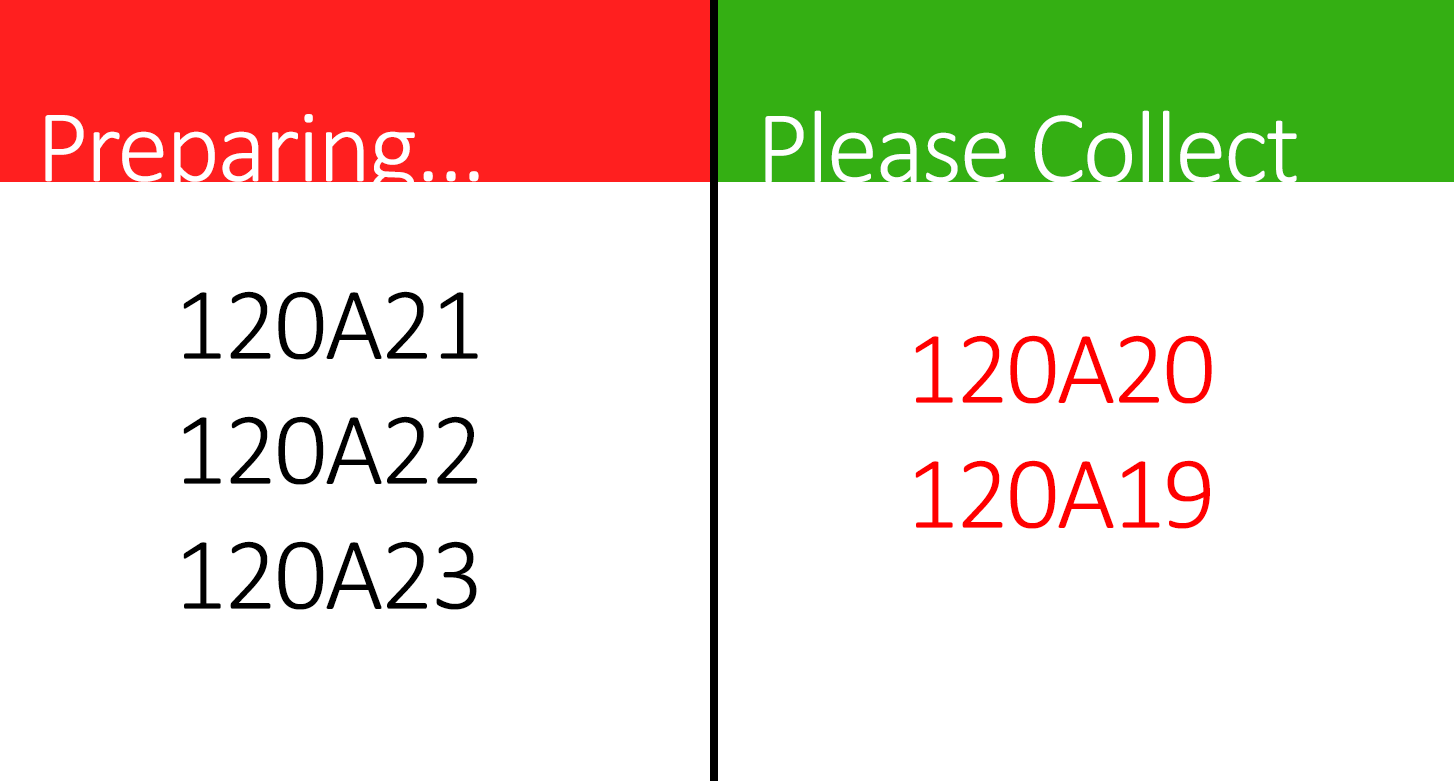
<style>
.page{position:relative;width:1454px;height:781px;background:#ffffff}
.page>*{position:absolute;margin:0}
.t1{font:104.2px "Calibri-Light";letter-spacing:-0.025em;color:#ffffff}
.t2{font:104.2px "Calibri-Light";letter-spacing:-0.025em;color:#000000}
.t3{font:104.2px "Calibri-Light";letter-spacing:-0.025em;color:#ff0000}
</style>
<div class="page">
<p class="t1" style="left:765px;top:110px;width:532px;height:73px">Please Collect</p>
<p class="t1" style="left:45px;top:114px;width:434px;height:86px">Preparing...</p>
<p class="t2" style="left:183px;top:291px;width:295px;height:319px">120A21<br>120A22<br>120A23</p>
<p class="t3" style="left:915px;top:335px;width:297px;height:194px">120A20<br>120A19</p>
</div>
